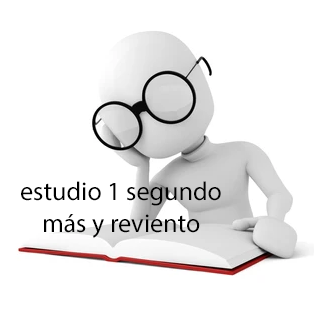
<style>
.page{position:relative;width:314px;height:315px;background:#ffffff}
.page>*{position:absolute;margin:0}
.t1{font:26.1px "MyriadPro-Regular";color:#000000}
</style>
<div class="page">
<p class="t1" style="left:21px;top:181px;width:200px;height:57px;text-align:center">estudio 1 segundo<br>más y reviento</p>
</div>
